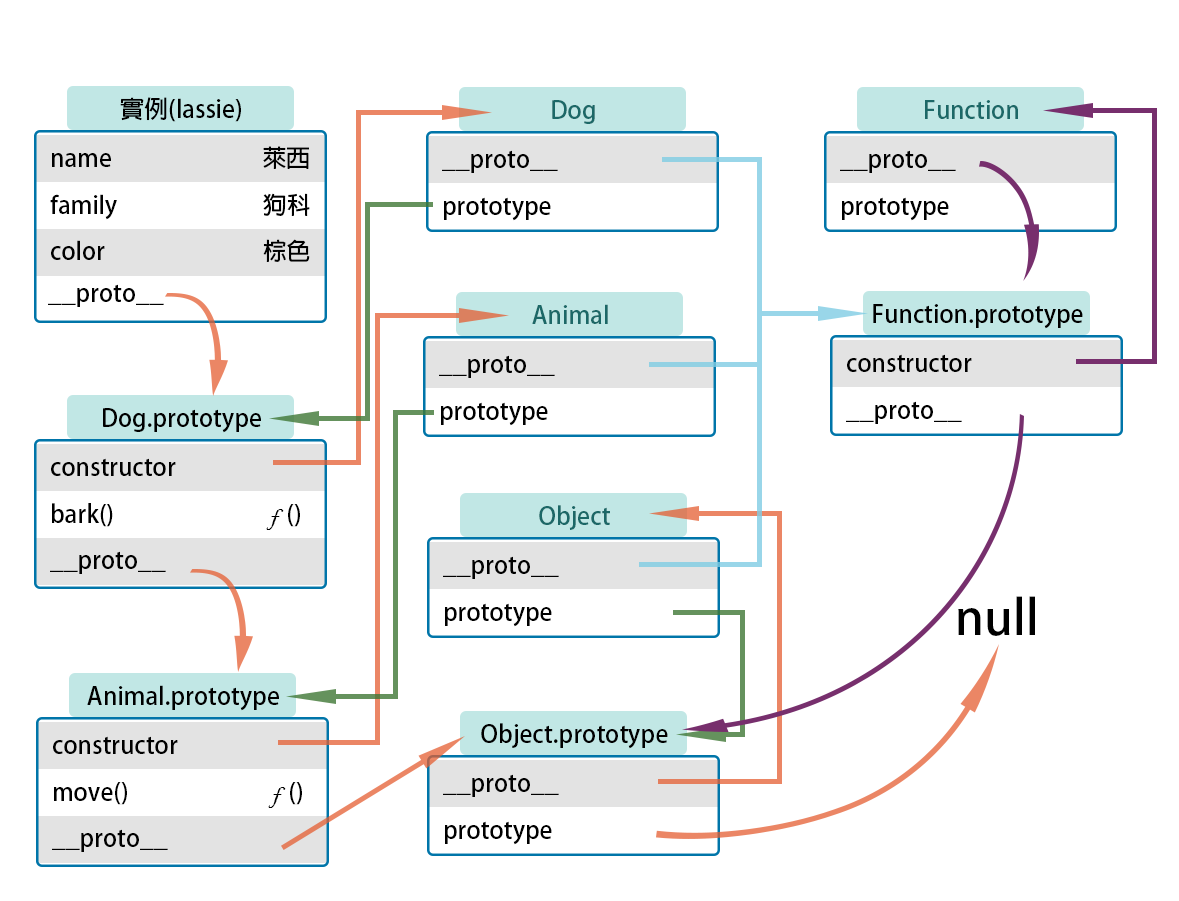
<style>
.page{position:relative;width:1179px;height:901px;background:#ffffff}
.page>*{position:absolute;margin:0}
.t1{font:24px "AdobeFanHeitiStd-Bold";color:#000000}
.t2{font:24px "AdobeFanHeitiStd-Bold";color:#1c6867}
.t3{font:24px "BlackadderITC-Regular";color:#000000}
.t4{font:48px "AdobeFanHeitiStd-Bold";color:#000000}
</style>
<div class="page">
<p class="t1" style="left:120px;top:97px;width:121px;height:25px">實例(lassie)</p>
<p class="t2" style="left:552px;top:100px;width:43px;height:24px">Dog</p>
<p class="t2" style="left:925px;top:100px;width:93px;height:19px">Function</p>
<p class="t1" style="left:52px;top:146px;width:257px;height:23px">name    萊西</p>
<p class="t1" style="left:442px;top:150px;width:116px;height:23px">__proto__</p>
<p class="t1" style="left:840px;top:150px;width:116px;height:23px">__proto__</p>
<p class="t1" style="left:50px;top:193px;width:260px;height:27px">family    狗科</p>
<p class="t1" style="left:444px;top:197px;width:107px;height:24px">prototype</p>
<p class="t1" style="left:842px;top:197px;width:107px;height:24px">prototype</p>
<p class="t1" style="left:51px;top:239px;width:259px;height:23px">color    棕色</p>
<p class="t1" style="left:48px;top:284px;width:116px;height:23px">__proto__</p>
<p class="t2" style="left:532px;top:304px;width:76px;height:20px">Animal</p>
<p class="t1" style="left:873px;top:304px;width:210px;height:25px">Function.prototype</p>
<p class="t1" style="left:439px;top:355px;width:116px;height:23px">__proto__</p>
<p class="t1" style="left:847px;top:354px;width:125px;height:18px">constructor</p>
<p class="t1" style="left:846px;top:401px;width:116px;height:23px">__proto__</p>
<p class="t1" style="left:103px;top:408px;width:158px;height:25px">Dog.prototype</p>
<p class="t1" style="left:441px;top:402px;width:107px;height:24px">prototype</p>
<p class="t1" style="left:51px;top:458px;width:125px;height:18px">constructor</p>
<p class="t1" style="left:52px;top:503px;width:248px;height:27px">bark()    <span class="t3">f  </span>()</p>
<p class="t2" style="left:539px;top:505px;width:71px;height:25px">Object</p>
<p class="t1" style="left:50px;top:551px;width:116px;height:23px">__proto__</p>
<p class="t1" style="left:443px;top:556px;width:116px;height:23px">__proto__</p>
<p class="t1" style="left:445px;top:603px;width:107px;height:24px">prototype</p>
<p class="t4" style="left:958px;top:596px;width:77px;height:40px">null</p>
<p class="t1" style="left:87px;top:685px;width:192px;height:26px">Animal.prototype</p>
<p class="t1" style="left:481px;top:723px;width:187px;height:26px">Object.prototype</p>
<p class="t1" style="left:53px;top:736px;width:125px;height:18px">constructor</p>
<p class="t1" style="left:443px;top:774px;width:116px;height:23px">__proto__</p>
<p class="t1" style="left:54px;top:782px;width:248px;height:26px">move()   <span class="t3">f  </span>()</p>
<p class="t1" style="left:445px;top:821px;width:107px;height:24px">prototype</p>
<p class="t1" style="left:52px;top:829px;width:116px;height:23px">__proto__</p>
</div>
